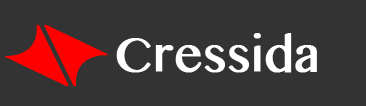
<style>
.page{position:relative;width:366px;height:106px;background:#333333}
.page>*{position:absolute;margin:0}
.t1{font:86.3px "Eyecicles";letter-spacing:-0.4em;color:#ff0000;font-weight:bold}
.t2{font:48px "BanglaMN";color:#fefefe;font-weight:bold}
</style>
<div class="page">
<p class="t1" style="left:5px;top:25px;width:103px;height:61px">DA</p>
<p class="t2" style="left:116px;top:33px;width:201px;height:40px">Cressida</p>
</div>
